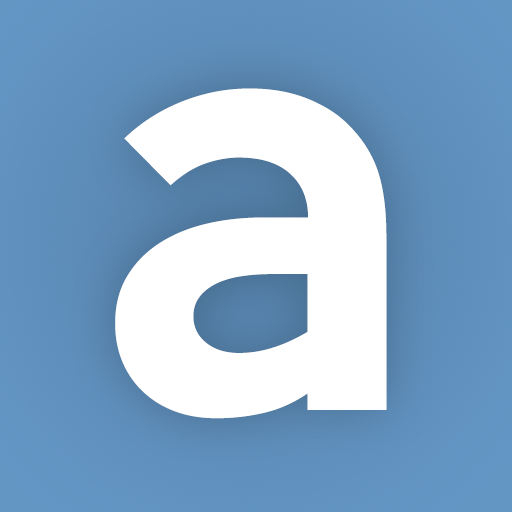
<style>
.page{position:relative;width:512px;height:512px;background:#ffffff}
.page>*{position:absolute;margin:0}
.t1{font:542.2px "KeepCalm-Medium";color:#ffffff}
</style>
<div class="page">
<p class="t1" style="left:115px;top:88px;width:272px;height:331px">a</p>
</div>
